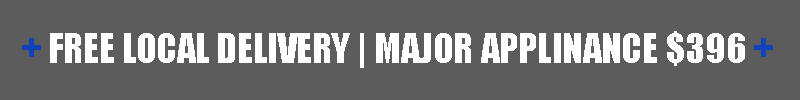
<style>
.page{position:relative;width:800px;height:100px;background:#5c5c5c}
.page>*{position:absolute;margin:0}
.t1{font:37.8px "Impact";color:#ffffff}
.t2{font:37.8px "Impact";color:#1043bb}
</style>
<div class="page">
<p class="t1" style="left:22px;top:31px;width:751px;height:37px"><span class="t2">+ </span>FREE LOCAL DELIVERY | MAJOR APPLINANCE $396 <span class="t2">+</span></p>
</div>
